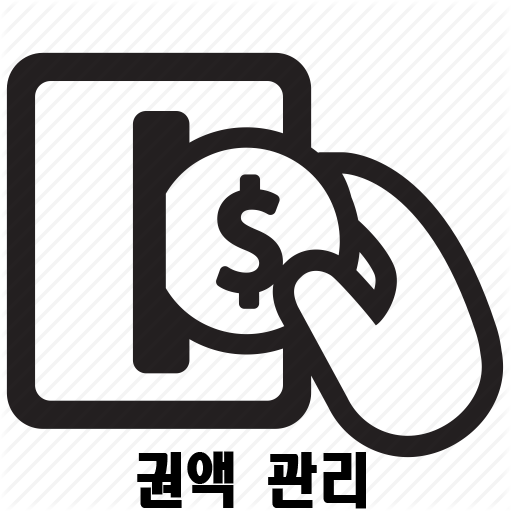
<style>
.page{position:relative;width:511px;height:511px;background:#ffffff}
.page>*{position:absolute;margin:0}
.t1{font:58.8px "HeadlineR-HM";color:#000000;scale:0.9 1}
</style>
<div class="page">
<p class="t1" style="left:137px;top:451px;width:229px;height:58px">권액 관리</p>
</div>
